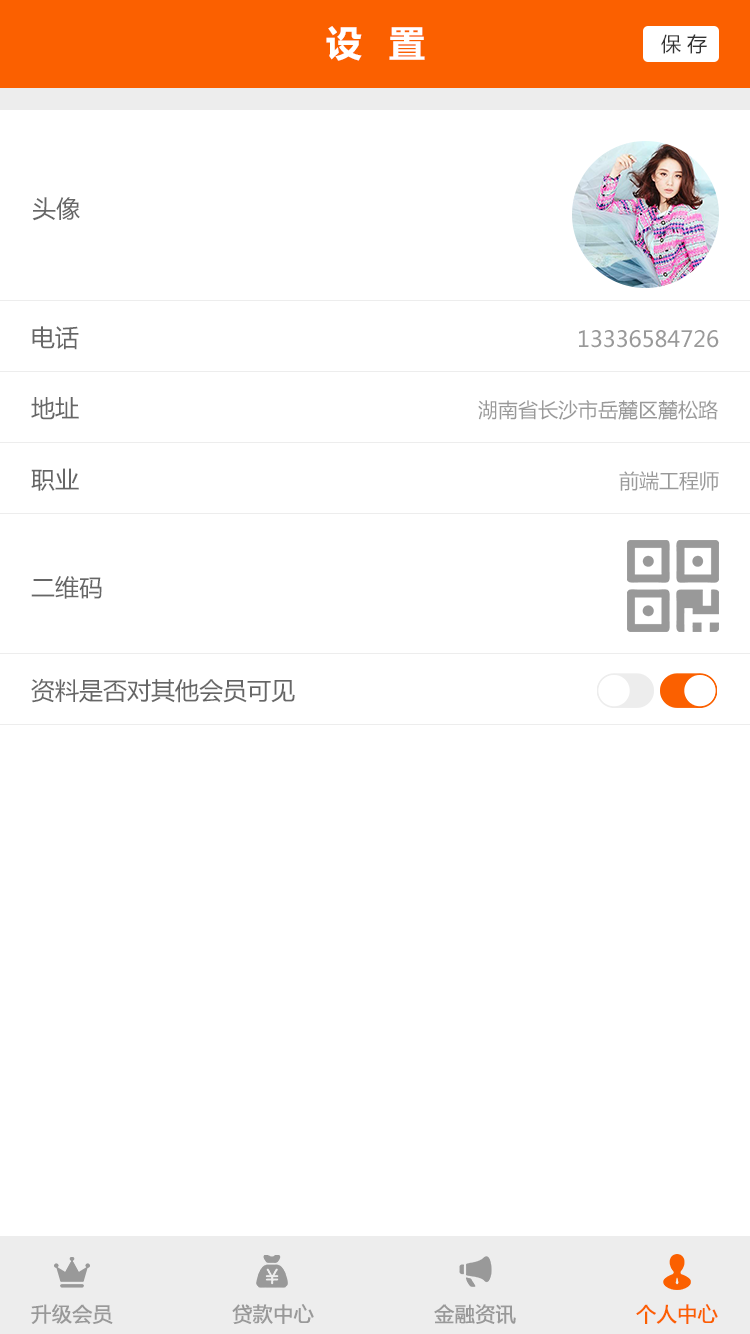
<style>
.page{position:relative;width:750px;height:1334px;background:#ffffff}
.page>*{position:absolute;margin:0}
.t1{font:36px "MicrosoftYaHei-Bold";letter-spacing:0.05em;color:#ffffff}
.t2{font:20px "MicrosoftYaHei";color:#333333}
.t3{font:24px "MicrosoftYaHei";color:#666666}
.t4{font:22px "MicrosoftYaHei";color:#999999}
.t5{font:20px "MicrosoftYaHei";color:#999999}
.t6{font:20px "MicrosoftYaHei";color:#999999;font-weight:bold}
.t7{font:20px "MicrosoftYaHei";color:#fb6000;font-weight:bold}
</style>
<div class="page">
<p class="t1" style="left:326px;top:26px;width:99px;height:35px">设  置</p>
<p class="t2" style="left:661px;top:34px;width:46px;height:20px">保 存</p>
<p class="t3" style="left:32px;top:197px;width:48px;height:24px">头像</p>
<p class="t3" style="left:32px;top:326px;width:47px;height:24px">电话</p>
<p class="t4" style="left:579px;top:330px;width:140px;height:18px">13336584726</p>
<p class="t3" style="left:31px;top:397px;width:48px;height:23px">地址</p>
<p class="t5" style="left:478px;top:400px;width:240px;height:20px">湖南省长沙市岳麓区麓松路</p>
<p class="t3" style="left:31px;top:468px;width:48px;height:23px">职业</p>
<p class="t5" style="left:619px;top:471px;width:100px;height:20px">前端工程师</p>
<p class="t3" style="left:31px;top:576px;width:71px;height:23px">二维码</p>
<p class="t3" style="left:31px;top:678px;width:264px;height:25px">资料是否对其他会员可见</p>
<p class="t6" style="left:31px;top:1304px;width:82px;height:20px">升级会员</p>
<p class="t6" style="left:232px;top:1304px;width:82px;height:20px">贷款中心</p>
<p class="t6" style="left:434px;top:1304px;width:82px;height:20px">金融资讯</p>
<p class="t7" style="left:636px;top:1304px;width:82px;height:20px">个人中心</p>
</div>
